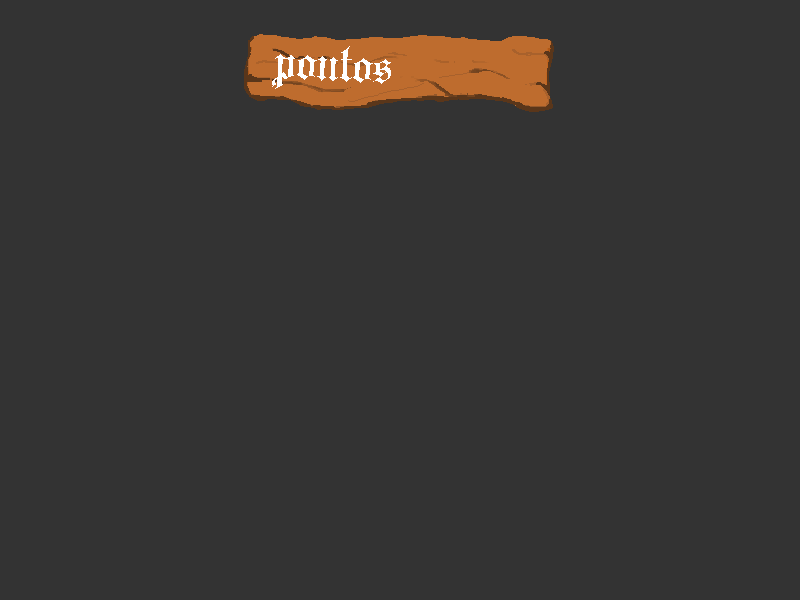
<style>
.page{position:relative;width:800px;height:600px;background:#333333}
.page>*{position:absolute;margin:0}
.t1{font:51.6px "KaiserzeitGotisch";color:#ffffff}
</style>
<div class="page">
<p class="t1" style="left:272px;top:46px;width:119px;height:43px;rotate:3deg">pontos</p>
</div>
